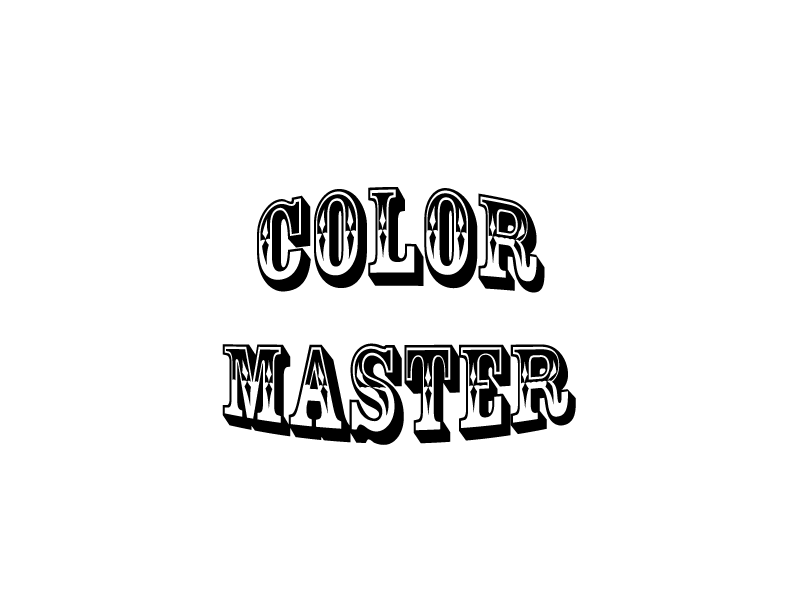
<style>
.page{position:relative;width:800px;height:600px;background:#ffffff}
.page>*{position:absolute;margin:0}
.t1{font:100px "RosewoodStd-Regular";color:#000000}
</style>
<div class="page">
<p class="t1" style="left:222px;top:187px;width:354px;height:258px;text-align:center">COLOR <br>MASTER</p>
</div>
